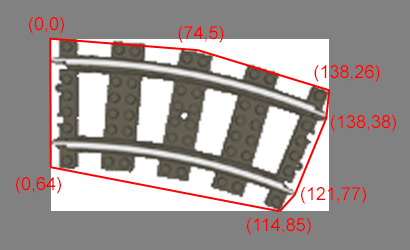
<style>
.page{position:relative;width:410px;height:250px;background:#818181}
.page>*{position:absolute;margin:0}
.t1{font:18px "ArialMT";color:#ff0000}
</style>
<div class="page">
<p class="t1" style="left:29px;top:17px;width:35px;height:17px">(0,0)</p>
<p class="t1" style="left:178px;top:26px;width:46px;height:17px">(74,5)</p>
<p class="t1" style="left:314px;top:65px;width:66px;height:17px">(138,26)</p>
<p class="t1" style="left:331px;top:115px;width:65px;height:17px">(138,38)</p>
<p class="t1" style="left:16px;top:177px;width:45px;height:17px">(0,64)</p>
<p class="t1" style="left:301px;top:187px;width:65px;height:17px">(121,77)</p>
<p class="t1" style="left:247px;top:218px;width:64px;height:17px">(114,85)</p>
</div>
